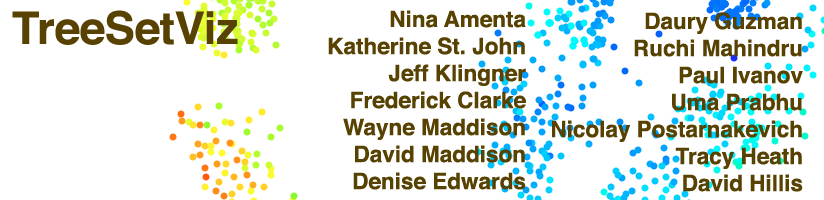
<style>
.page{position:relative;width:824px;height:200px;background:#ffffff}
.page>*{position:absolute;margin:0}
.t1{font:45px "Helvetica-Bold";color:#574201}
.t2{font:22.5px "Helvetica-Bold";color:#574201}
</style>
<div class="page">
<p class="t1" style="left:12px;top:10px;width:226px;height:35px">TreeSetViz</p>
<p class="t2" style="left:328px;top:10px;width:198px;height:180px;text-align:right">Nina Amenta<br>Katherine St. John<br>Jeff Klingner<br>Frederick Clarke<br>Wayne Maddison<br>David Maddison<br>Denise Edwards</p>
</div>
